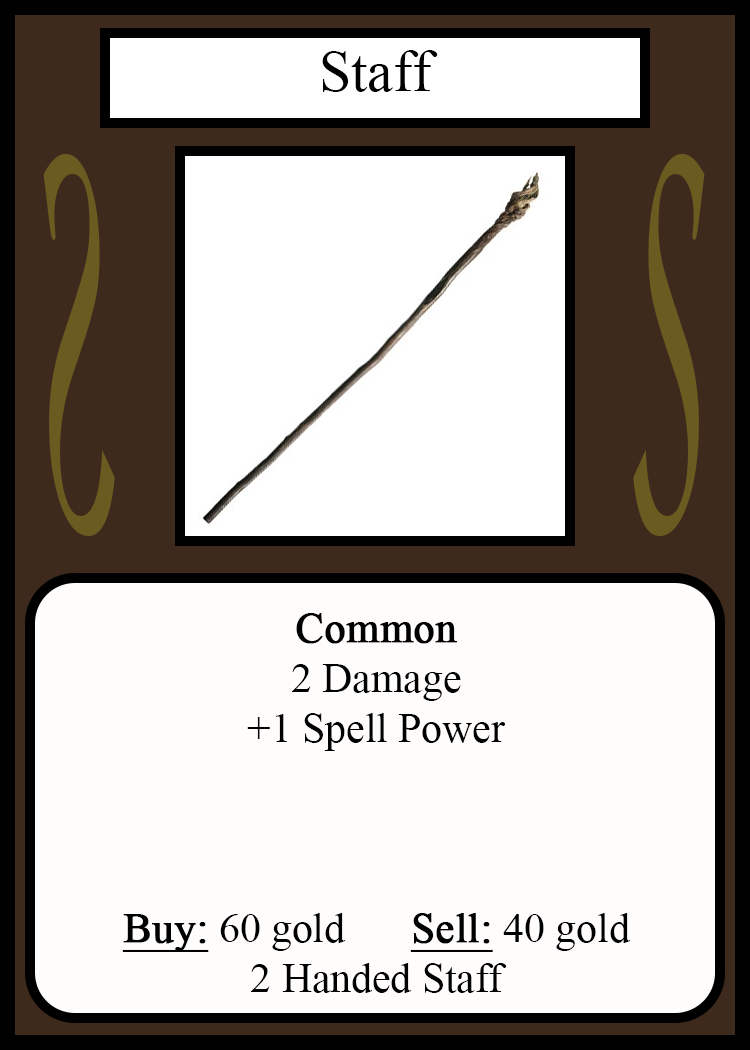
<style>
.page{position:relative;width:750px;height:1050px;background:#fffcfc}
.page>*{position:absolute;margin:0}
.t1{font:58.3px "TimesNewRomanPSMT";color:#010101}
.t2{font:548.5px "Apple-Chancery";color:#6a5c21;scale:0.27 1}
.t3{font:548.2px "Apple-Chancery";color:#6a5c21;scale:0.27 1}
.t4{font:41.7px "TimesNewRomanPSMT";color:#000000}
.t5{font:41.7px "TimesNewRomanPSMT";color:#000000;font-weight:bold}
.t6{font:41.7px "TimesNewRomanPSMT";color:#000000;font-weight:bold;text-decoration:underline}
</style>
<div class="page">
<p class="t1" style="left:322px;top:50px;width:116px;height:42px">Staff</p>
<p class="t2" style="left:43px;top:154px;width:72px;height:382px;rotate:180deg">S</p>
<p class="t3" style="left:633px;top:154px;width:72px;height:382px">S</p>
<p class="t4" style="left:122px;top:613px;width:509px;height:380px;text-align:center"><span class="t5">Common<br></span>2 Damage<br>+1 Spell Power<br><br><br><br><span class="t6">Buy:</span> 60 gold   <span class="t6">Sell:</span> 40 gold<br>2 Handed Staff</p>
</div>
